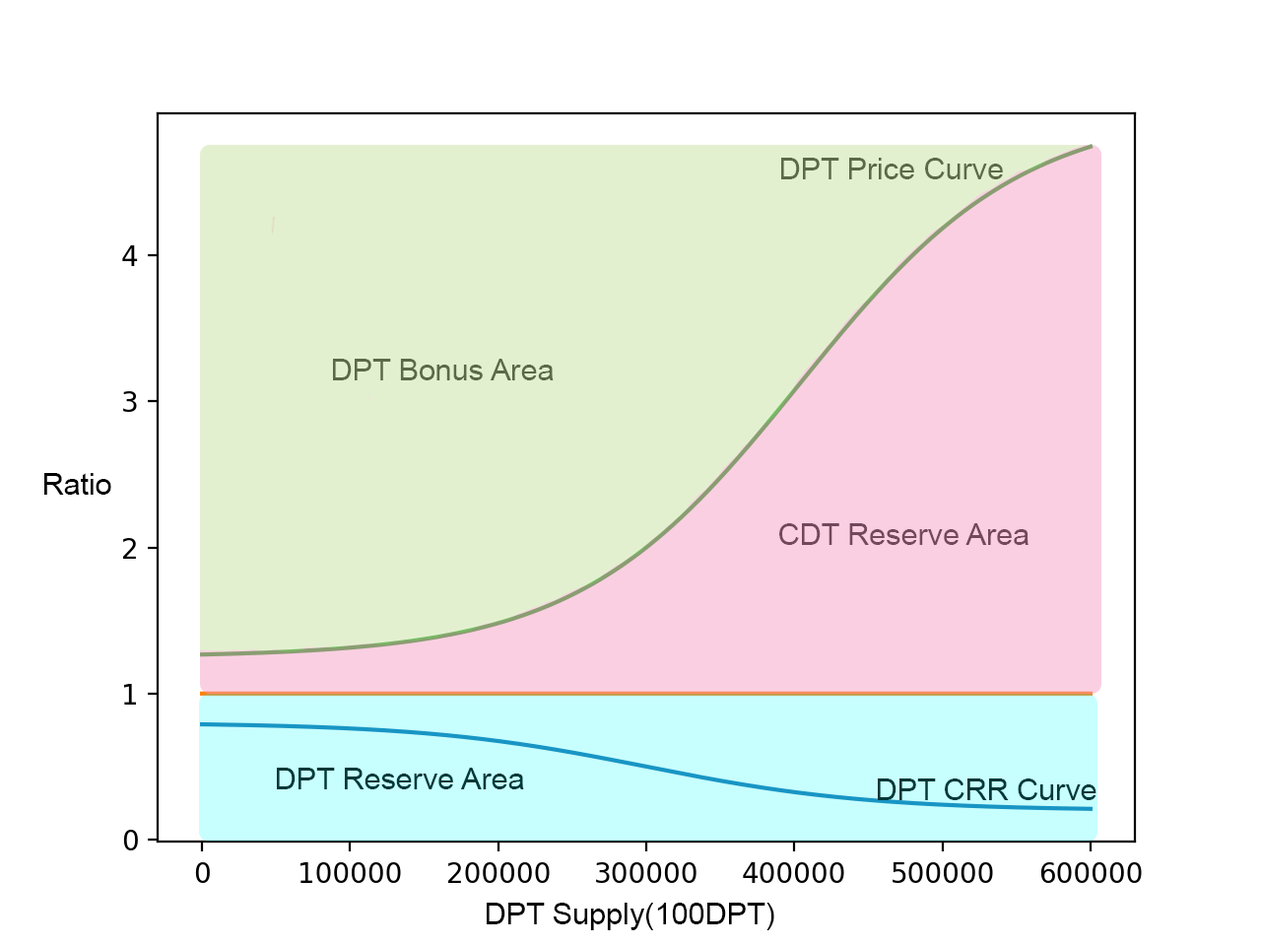
<style>
.page{position:relative;width:1261px;height:946px;background:#ffffff}
.page>*{position:absolute;margin:0}
.t1{font:30.1px "ArialMT";color:#5c6949}
.t2{font:30.1px "ArialMT";color:#000000}
.t3{font:30.1px "ArialMT";color:#73485b}
.t4{font:30.1px "ArialMT";color:#003838}
</style>
<div class="page">
<p class="t1" style="left:781px;top:158px;width:222px;height:21px">DPT Price Curve</p>
<p class="t1" style="left:333px;top:359px;width:221px;height:21px">DPT Bonus Area</p>
<p class="t2" style="left:44px;top:473px;width:67px;height:22px">Ratio</p>
<p class="t3" style="left:779px;top:523px;width:249px;height:22px">CDT Reserve Area</p>
<p class="t4" style="left:277px;top:767px;width:247px;height:22px">DPT Reserve Area</p>
<p class="t4" style="left:878px;top:778px;width:218px;height:22px">DPT CRR Curve</p>
<p class="t2" style="left:487px;top:902px;width:287px;height:28px">DPT Supply(100DPT)</p>
</div>
